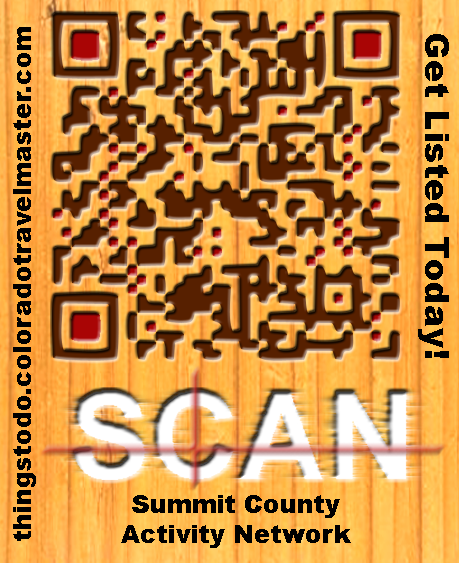
<style>
.page{position:relative;width:459px;height:563px}
.page>*{position:absolute;margin:0}
.t1{font:25px "Arial-Black";color:#000000}
.t2{font:33.3px "Arial-Black";color:#000000}
</style>
<div class="page">
<p class="t1" style="left:13px;top:27px;width:23px;height:514px;rotate:-90deg">thingstodo.coloradotravelmaster.com</p>
<p class="t2" style="left:418px;top:34px;width:31px;height:324px;rotate:90deg">Get Listed Today!</p>
<p class="t1" style="left:121px;top:495px;width:230px;height:53px;text-align:center">Summit County<br>Activity Network</p>
</div>
